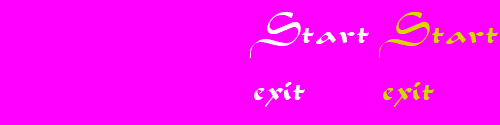
<style>
.page{position:relative;width:500px;height:125px;background:#ff00ff}
.page>*{position:absolute;margin:0}
.t1{font:48px "Aladdin";color:#ffffff}
.t2{font:48px "Aladdin";color:#d4d700}
</style>
<div class="page">
<p class="t1" style="left:250px;top:12px;width:119px;height:95px">Start<br>exit</p>
<p class="t2" style="left:379px;top:12px;width:119px;height:95px">Start<br>exit</p>
</div>
